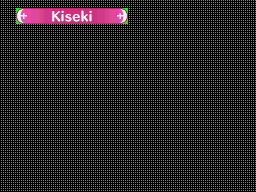
<style>
.page{position:relative;width:256px;height:192px;background:#000000}
.page>*{position:absolute;margin:0}
.t1{font:12px "HummingStd-E";letter-spacing:0.05em;color:#fefefe}
</style>
<div class="page">
<p class="t1" style="left:52px;top:10px;width:40px;height:12px">Kiseki</p>
</div>
